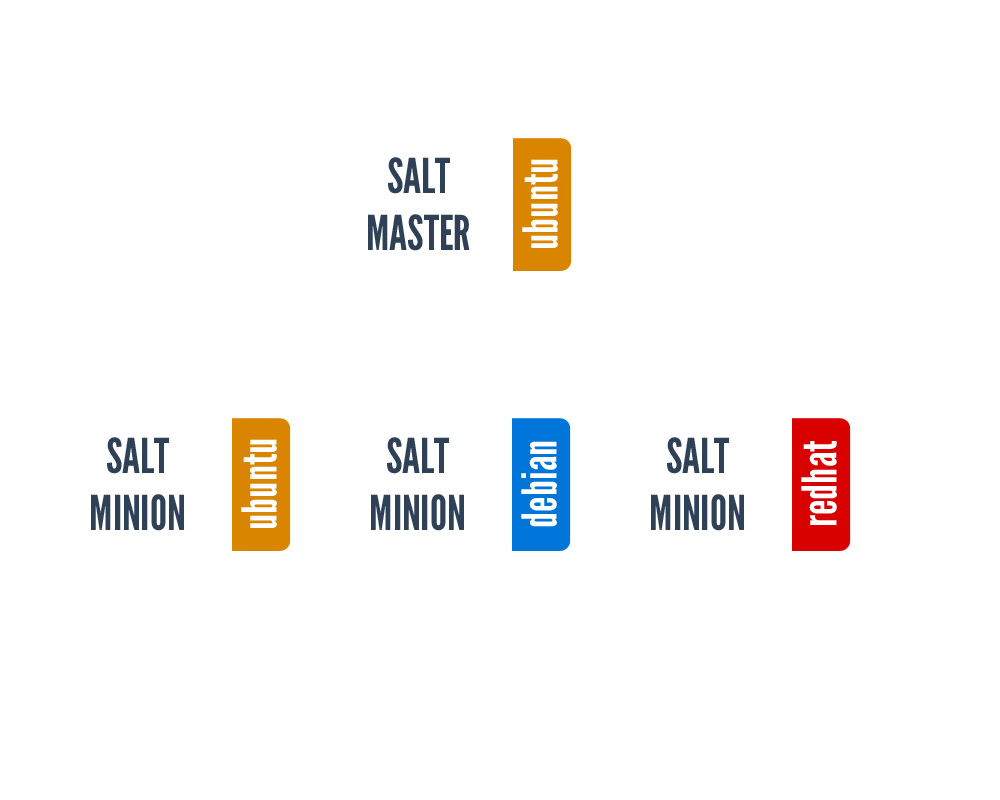
<style>
.page{position:relative;width:1000px;height:800px;background:#ffffff}
.page>*{position:absolute;margin:0}
.t1{font:48px "LeagueGothic-Regular";color:#2f4157}
.t2{font:48px "LeagueGothic-Regular";color:#ffffff}
</style>
<div class="page">
<p class="t1" style="left:368px;top:157px;width:102px;height:94px;text-align:center">SALT<br>MASTER</p>
<p class="t2" style="left:522px;top:159px;width:36px;height:89px;rotate:-90deg">ubuntu</p>
<p class="t1" style="left:91px;top:437px;width:93px;height:94px;text-align:center">SALT<br>MINION</p>
<p class="t1" style="left:371px;top:437px;width:93px;height:94px;text-align:center">SALT<br>MINION</p>
<p class="t1" style="left:651px;top:437px;width:93px;height:94px;text-align:center">SALT<br>MINION</p>
<p class="t2" style="left:241px;top:439px;width:36px;height:89px;rotate:-90deg">ubuntu</p>
<p class="t2" style="left:521px;top:441px;width:36px;height:86px;rotate:-90deg">debian</p>
<p class="t2" style="left:801px;top:441px;width:36px;height:84px;rotate:-90deg">redhat</p>
</div>
